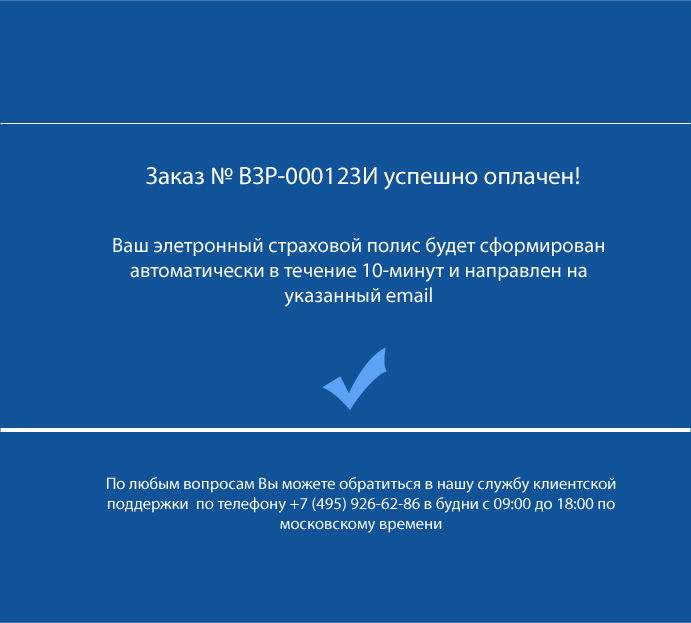
<style>
.page{position:relative;width:691px;height:623px;background:#115399}
.page>*{position:absolute;margin:0}
.t1{font:25px "MyriadPro-Regular";color:#ffffff}
.t2{font:20.8px "MyriadPro-Regular";color:#ffffff}
.t3{font:16.7px "MyriadPro-Regular";color:#ffffff}
</style>
<div class="page">
<p class="t1" style="left:146px;top:167px;width:433px;height:23px">Заказ № ВЗР-000123И успешно оплачен!</p>
<p class="t2" style="left:113px;top:237px;width:491px;height:70px;text-align:center"><span class="t1"><br></span><br>Ваш элетронный страховой полис будет сформирован автоматически в течение 10-минут и направлен на указанный email</p>
<p class="t3" style="left:107px;top:477px;width:509px;height:56px;text-align:center">По любым вопросам Вы можете обратиться в нашу службу клиентской поддержки  по телефону +7 (495) 926-62-86 в будни с 09:00 до 18:00 по московскому времени</p>
</div>
